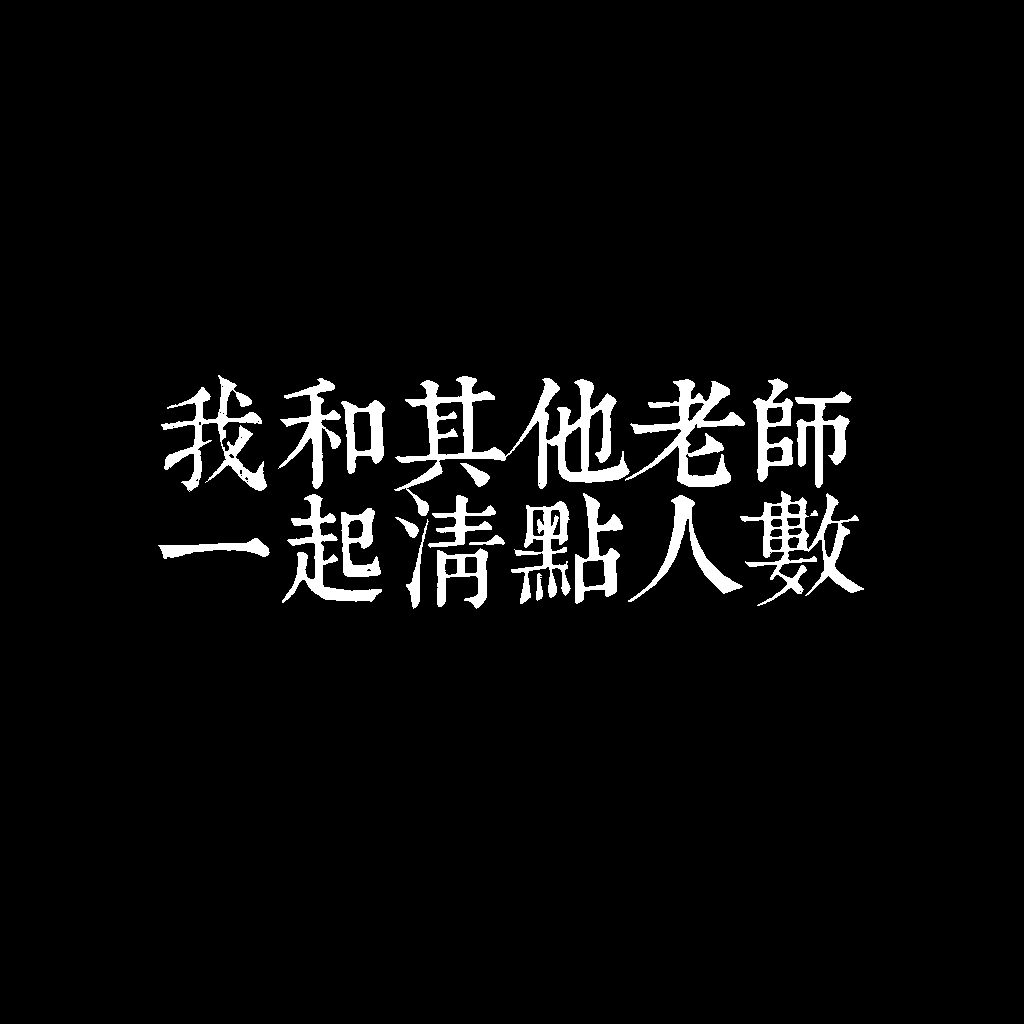
<style>
.page{position:relative;width:1024px;height:1024px;background:#000000}
.page>*{position:absolute;margin:0}
.t1{font:120px/115px "TpldKhangXiDictTrial";letter-spacing:-0.02em;color:#ffffff}
</style>
<div class="page">
<p class="t1" style="left:158px;top:375px;width:706px;height:234px">我和其他老師<br>一起清點人數</p>
</div>
